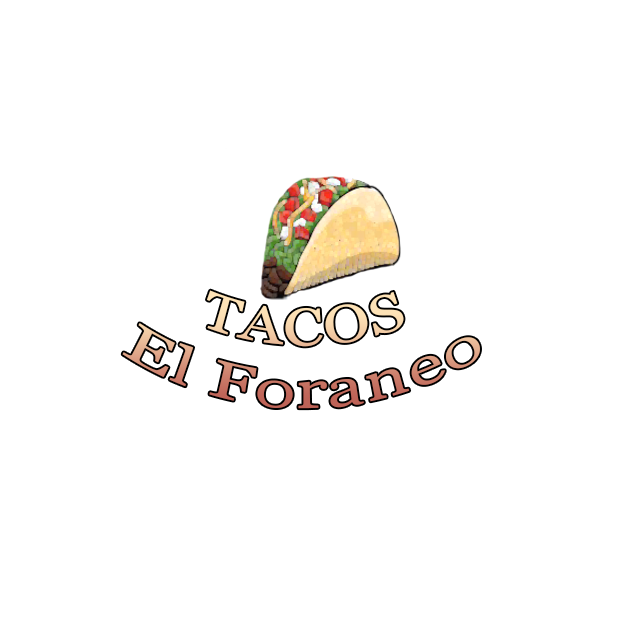
<style>
.page{position:relative;width:626px;height:626px;background:#ffffff}
.page>*{position:absolute;margin:0}
.t1{font:52.5px "Georgia";scale:0.92 1}
</style>
<div class="page">
<p class="t1" style="left:122px;top:290px;width:358px;height:119px;text-align:center">TACOS<br>El Foraneo</p>
</div>
